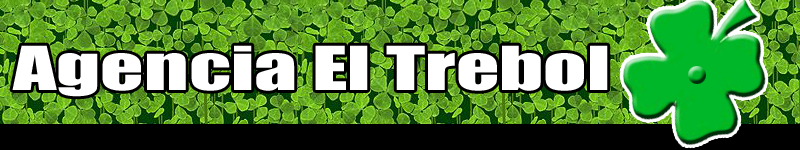
<style>
.page{position:relative;width:800px;height:150px;background:#000000}
.page>*{position:absolute;margin:0}
.t1{font:56px "Impact";color:#ffffff;scale:1.52 1}
</style>
<div class="page">
<p class="t1" style="left:12px;top:45px;width:596px;height:52px">Agencia El Trebol</p>
</div>
